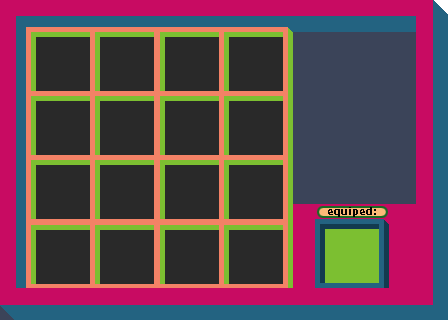
<style>
.page{position:relative;width:448px;height:320px;background:#292929}
.page>*{position:absolute;margin:0}
.t1{font:11px "SourceSansPro-Bold";letter-spacing:0.05em;color:#050300}
</style>
<div class="page">
<p class="t1" style="left:328px;top:207px;width:48px;height:10px">equiped:</p>
</div>
